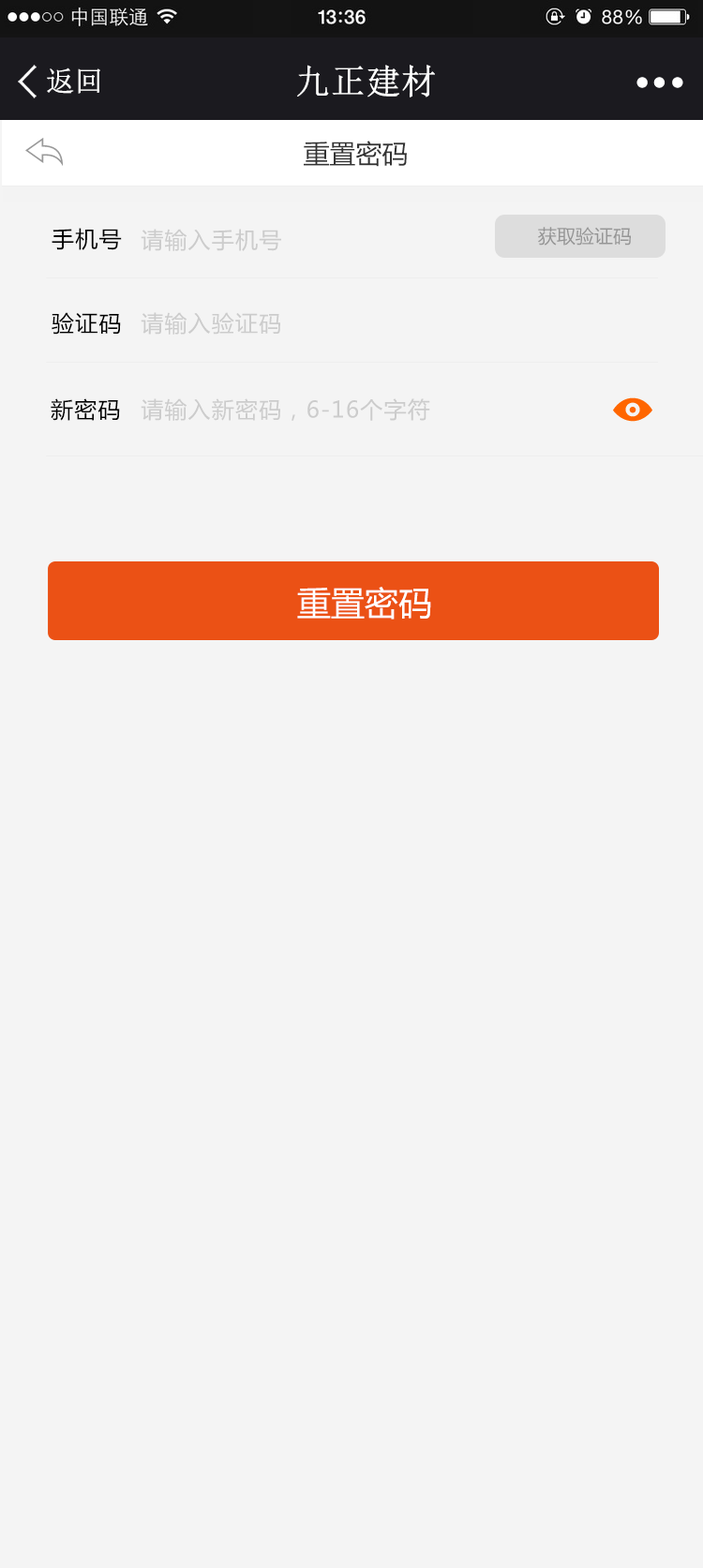
<style>
.page{position:relative;width:703px;height:1568px;background:#f4f4f4}
.page>*{position:absolute;margin:0}
.t1{font:34.4px "NSimSun";color:#ffffff;font-weight:bold}
.t2{font:28.1px "NSimSun";color:#ffffff;font-weight:bold}
.t3{font:26.2px "MicrosoftYaHei";color:#333333}
.t4{font:26.2px "MicrosoftYaHei";color:#333333;font-weight:bold}
.t5{font:22.5px "MicrosoftYaHei";letter-spacing:0.05em;color:#000000}
.t6{font:22.5px "MicrosoftYaHei";letter-spacing:0.05em;color:#cccccc}
.t7{font:18.7px "MicrosoftYaHei";color:#959595}
.t8{font:33.7px "MicrosoftYaHei";color:#ffffff}
</style>
<div class="page">
<p class="t1" style="left:297px;top:65px;width:138px;height:32px">九正建材</p>
<p class="t2" style="left:47px;top:67px;width:53px;height:27px">返回</p>
<p class="t3" style="left:304px;top:141px;width:103px;height:26px"><span class="t4"><br></span>重置密码</p>
<p class="t5" style="left:52px;top:228px;width:70px;height:22px">手机号</p>
<p class="t6" style="left:141px;top:229px;width:140px;height:22px">请输入手机号</p>
<p class="t7" style="left:538px;top:227px;width:93px;height:19px">获取验证码</p>
<p class="t5" style="left:52px;top:312px;width:69px;height:23px">验证码</p>
<p class="t6" style="left:141px;top:312px;width:139px;height:23px">请输入验证码</p>
<p class="t5" style="left:51px;top:398px;width:69px;height:23px">新密码</p>
<p class="t6" style="left:141px;top:398px;width:289px;height:23px">请输入新密码，6-16个字符</p>
<p class="t8" style="left:297px;top:587px;width:134px;height:33px">重置密码</p>
</div>
